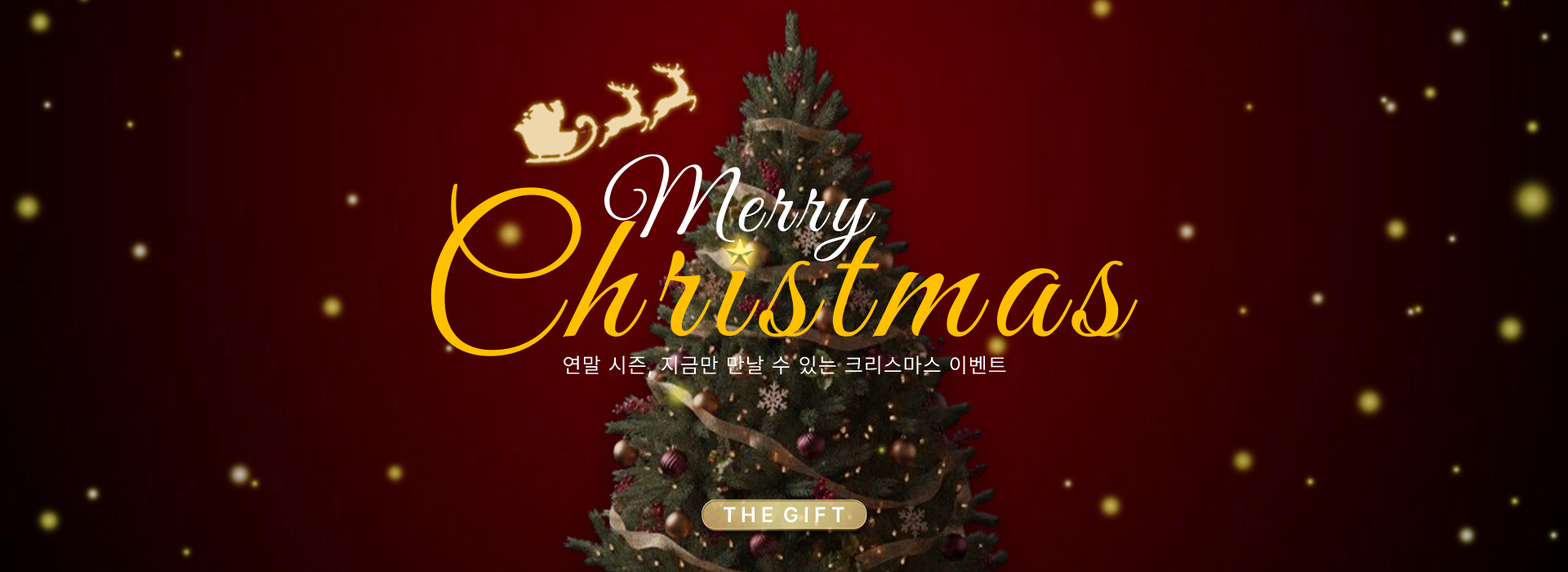
<style>
.page{position:relative;width:1568px;height:572px}
.page>*{position:absolute;margin:0}
.t1{font:94.4px "GreatVibes-Regular";letter-spacing:0.08em;color:#ffffff}
.t2{font:21.2px "Pretendard-Regular";letter-spacing:0.06em;color:#ffffff}
.t3{font:21.2px "Pretendard-SemiBold";color:#ffffff}
</style>
<div class="page">
<p class="t1" style="left:604px;top:154px;width:271px;height:107px">Merry</p>
<p class="t2" style="left:564px;top:355px;width:442px;height:22px">연말 시즌, 지금만 만날 수 있는 크리스마스 이벤트</p>
<p class="t3" style="left:724px;top:506px;width:120px;height:17px">T H E  G I F T</p>
</div>
